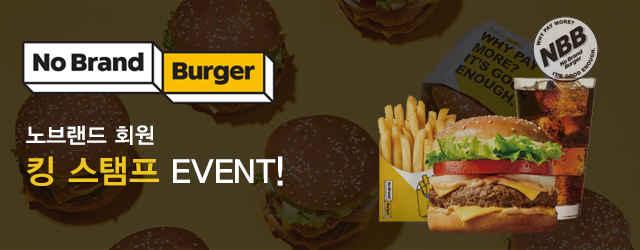
<style>
.page{position:relative;width:640px;height:250px}
.page>*{position:absolute;margin:0}
.t1{font:21.9px "YDIYGO340";color:#ffffff}
.t2{font:33.3px "YDIYGO340";color:#ffffff}
.t3{font:33.3px "YDIYGO340";color:#efc521}
</style>
<div class="page">
<p class="t1" style="left:26px;top:125px;width:128px;height:20px">노브랜드 회원</p>
<p class="t2" style="left:26px;top:156px;width:257px;height:30px"><span class="t3">킹 스탬프</span> EVENT!</p>
</div>
